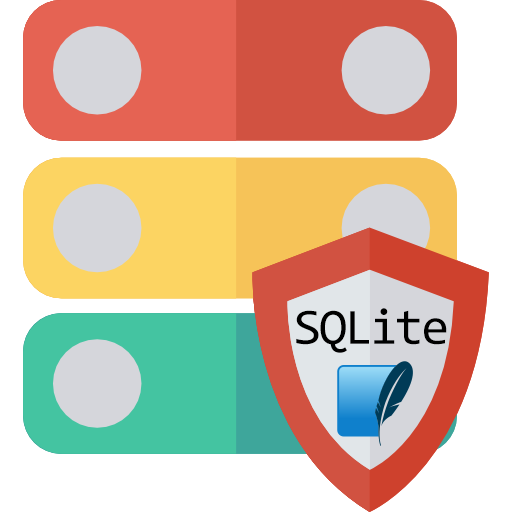
<style>
.page{position:relative;width:512px;height:512px;background:#ffffff}
.page>*{position:absolute;margin:0}
.t1{font:51.1px "Consolas";letter-spacing:-0.05em;color:#000000}
</style>
<div class="page">
<p class="t1" style="left:296px;top:308px;width:151px;height:45px">SQLite</p>
</div>
